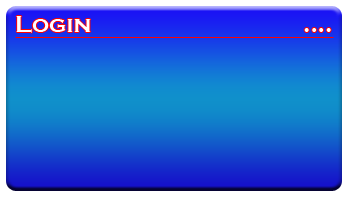
<style>
.page{position:relative;width:350px;height:200px}
.page>*{position:absolute;margin:0}
.t1{font:24px "CopperplateGothic-Bold";color:#ffffff}
</style>
<div class="page">
<p class="t1" style="left:16px;top:16px;width:315px;height:17px">Login      ....</p>
</div>
